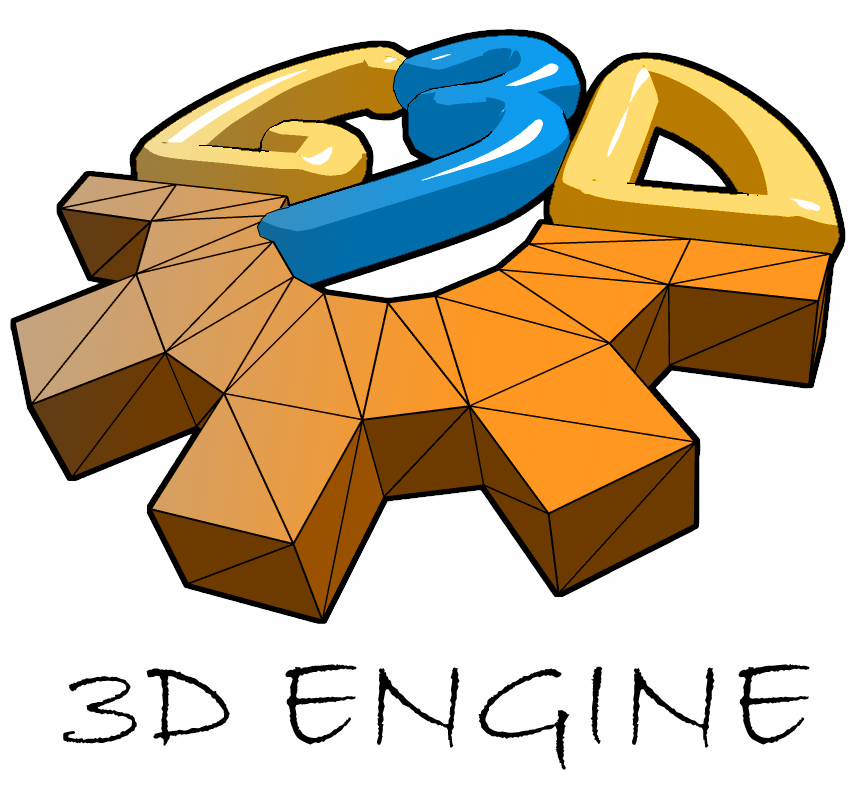
<style>
.page{position:relative;width:862px;height:792px;background:#fefefe}
.page>*{position:absolute;margin:0}
.t1{font:145px "BradleyHandITC";letter-spacing:0.005em;color:#000000}
</style>
<div class="page">
<p class="t1" style="left:63px;top:664px;width:747px;height:106px">3D ENGINE</p>
</div>
